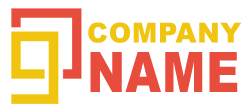
<style>
.page{position:relative;width:250px;height:110px;background:#ffffff}
.page>*{position:absolute;margin:0}
.t1{font:27.5px "Arial-Black";letter-spacing:0.02em;color:#f1c40f}
.t2{font:55.8px "Arial-Black";letter-spacing:0.02em;color:#e74c3c;scale:0.82 1}
</style>
<div class="page">
<p class="t1" style="left:88px;top:22px;width:154px;height:21px">COMPANY</p>
<p class="t2" style="left:90px;top:52px;width:148px;height:40px">NAME</p>
</div>
